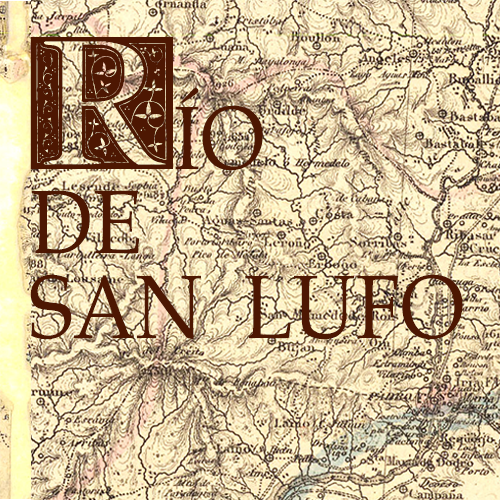
<style>
.page{position:relative;width:500px;height:500px}
.page>*{position:absolute;margin:0}
.t1{font:165px "FleurCornerCaps";color:#4d1702}
.t2{font:90px "BookAntiqua";color:#4d1702;scale:0.9 1}
</style>
<div class="page">
<p class="t1" style="left:30px;top:37px;width:143px;height:132px">R</p>
<p class="t2" style="left:175px;top:88px;width:88px;height:83px">ÍO</p>
<p class="t2" style="left:31px;top:190px;width:109px;height:64px">DE</p>
<p class="t2" style="left:30px;top:274px;width:433px;height:66px">SAN  LUFO</p>
</div>
